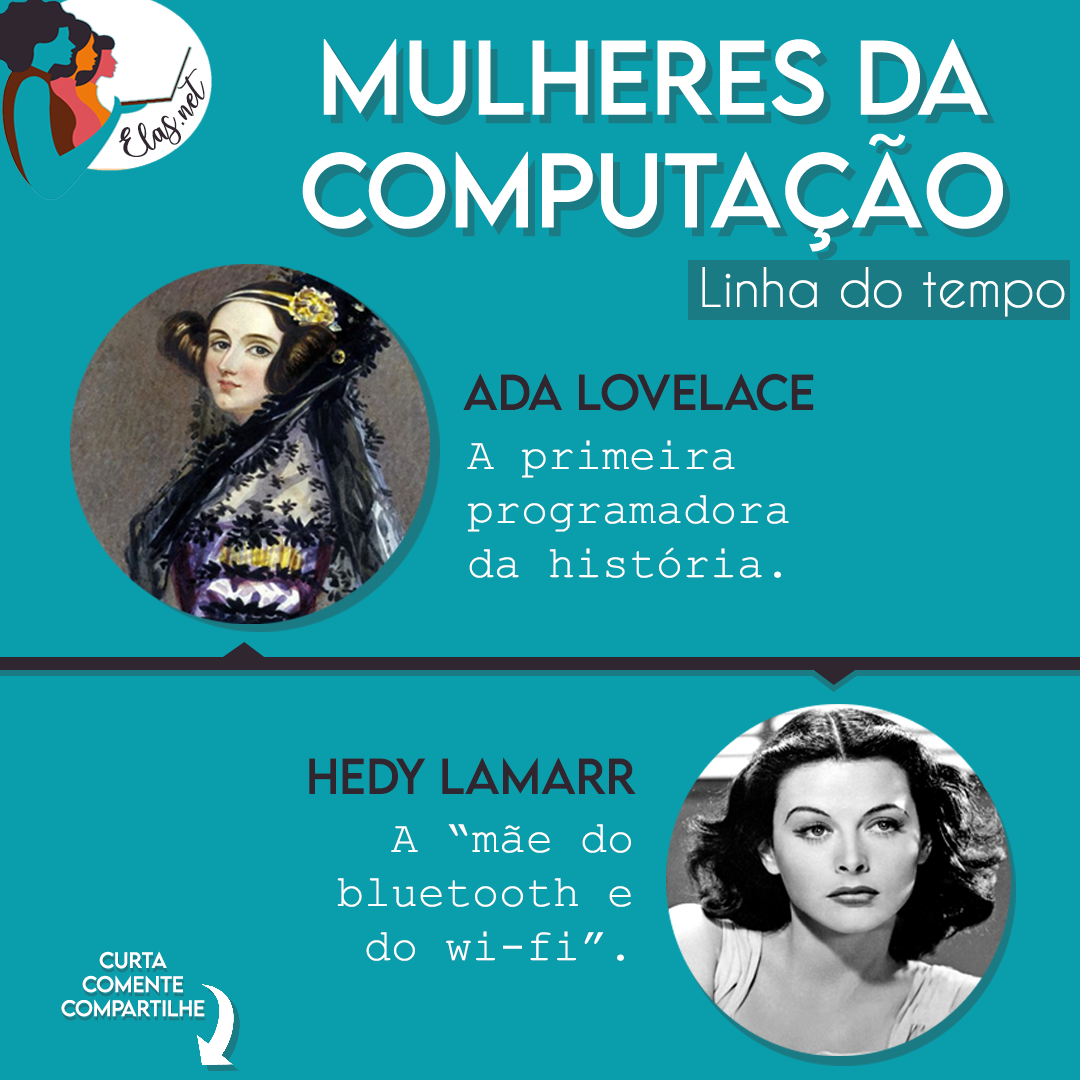
<style>
.page{position:relative;width:1080px;height:1080px;background:#0a9eac}
.page>*{position:absolute;margin:0}
.t1{font:25px "charlinda-Regular";color:#2f262f;scale:1.18 1}
.t2{font:51px "CaviarDreams";color:#ffffff}
.t3{font:45px "LEMONMILK-Regular";color:#2f262f}
.t4{font:45px "CourierNewPSMT";color:#ffffff}
.t5{font:20px "LEMONMILK-Regular";color:#ffffff}
</style>
<div class="page">
<p class="t1" style="left:119px;top:68px;width:86px;height:89px;rotate:-43deg">Elas.net</p>
<p class="t2" style="left:702px;top:267px;width:363px;height:50px">Linha do tempo</p>
<p class="t3" style="left:463px;top:373px;width:351px;height:38px">Ada Lovelace</p>
<p class="t4" style="left:467px;top:440px;width:322px;height:138px">A primeira <br>programadora <br>da história.</p>
<p class="t3" style="left:309px;top:757px;width:327px;height:37px">Hedy Lamarr</p>
<p class="t4" style="left:337px;top:824px;width:294px;height:137px;text-align:right">A “mãe do<br>bluetooth e<br>do wi-fi”.</p>
<p class="t5" style="left:61px;top:951px;width:144px;height:66px;text-align:center">Curta<br>Comente<br>Compartilhe</p>
</div>
